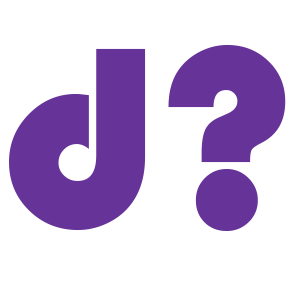
<style>
.page{position:relative;width:300px;height:300px;background:#ffffff}
.page>*{position:absolute;margin:0}
.t1{font:267px "Bauhaus93";color:#663399}
</style>
<div class="page">
<p class="t1" style="left:9px;top:44px;width:277px;height:187px">d?</p>
</div>
